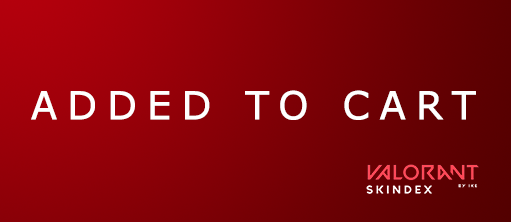
<style>
.page{position:relative;width:511px;height:222px}
.page>*{position:absolute;margin:0}
.t1{font:38.6px "Verdana";letter-spacing:0.24em;color:#ffffff;font-weight:bold}
</style>
<div class="page">
<p class="t1" style="left:31px;top:90px;width:445px;height:30px">ADDED TO CART</p>
</div>
